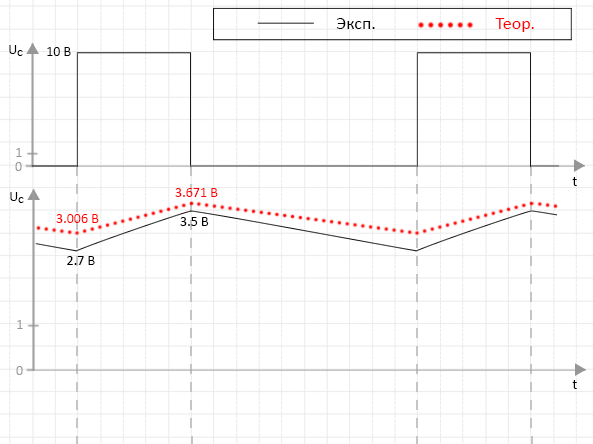
<style>
.page{position:relative;width:593px;height:444px;background:#ffffff}
.page>*{position:absolute;margin:0}
.t1{font:18px "Calibri";color:#000000}
.t2{font:18px "Calibri";color:#ff0000}
.t3{font:14px "Calibri";color:#000000}
.t4{font:10px "Calibri";color:#000000}
.t5{font:14px "Calibri";color:#969696}
.t6{font:14px "Calibri";color:#ff0000}
</style>
<div class="page">
<p class="t1" style="left:336px;top:18px;width:39px;height:11px">Эксп.</p>
<p class="t2" style="left:495px;top:18px;width:39px;height:14px">Теор.</p>
<p class="t3" style="left:9px;top:45px;width:8px;height:9px">U</p>
<p class="t4" style="left:17px;top:50px;width:6px;height:6px">C</p>
<p class="t3" style="left:47px;top:47px;width:24px;height:9px">10 В</p>
<p class="t5" style="left:16px;top:148px;width:6px;height:9px">1</p>
<p class="t5" style="left:15px;top:162px;width:7px;height:9px">0</p>
<p class="t3" style="left:572px;top:177px;width:5px;height:9px">t</p>
<p class="t3" style="left:10px;top:192px;width:8px;height:9px">U</p>
<p class="t4" style="left:18px;top:197px;width:6px;height:6px">C</p>
<p class="t6" style="left:175px;top:188px;width:43px;height:9px">3.671 В</p>
<p class="t6" style="left:56px;top:214px;width:43px;height:9px">3.006 В</p>
<p class="t3" style="left:180px;top:217px;width:29px;height:9px">3.5 В</p>
<p class="t3" style="left:67px;top:256px;width:28px;height:9px">2.7 В</p>
<p class="t5" style="left:17px;top:320px;width:6px;height:9px">1</p>
<p class="t5" style="left:16px;top:366px;width:7px;height:9px">0</p>
<p class="t3" style="left:572px;top:380px;width:5px;height:9px">t</p>
</div>
